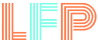
<style>
.page{position:relative;width:98px;height:40px;background:#ffffff}
.page>*{position:absolute;margin:0}
.t1{font:45.8px "Monoton-Regular";color:#ff7f50}
.t2{font:45.8px "Monoton-Regular";color:#7fffe8}
</style>
<div class="page">
<p class="t1" style="left:1px;top:2px;width:96px;height:38px">L<span class="t2">F</span>P</p>
</div>
